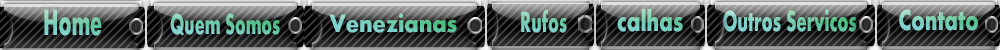
<style>
.page{position:relative;width:1000px;height:50px}
.page>*{position:absolute;margin:0}
.t1{font:37.7px "Aharoni-Bold";color:#7bceba;scale:0.56 1}
.t2{font:29.5px "Aharoni-Bold";scale:0.6 1}
.t3{font:26px "Aharoni-Bold";scale:0.89 1}
.t4{font:30.4px "Aharoni-Bold";color:#78ceb9;scale:0.59 1}
.t5{font:30px "Aharoni-Bold";color:#7aceb9;scale:0.74 1}
.t6{font:30px "Aharoni-Bold";scale:0.6 1}
.t7{font:30px "Aharoni-Bold";scale:0.72 1}
</style>
<div class="page">
<p class="t1" style="left:44px;top:9px;width:58px;height:27px">Home</p>
<p class="t2" style="left:170px;top:13px;width:110px;height:23px">Quem Somos</p>
<p class="t3" style="left:329px;top:13px;width:128px;height:20px">Venezianas</p>
<p class="t4" style="left:521px;top:9px;width:46px;height:24px">Rufos</p>
<p class="t5" style="left:617px;top:9px;width:66px;height:23px">calhas</p>
<p class="t6" style="left:723px;top:9px;width:134px;height:23px">Outros Servicos</p>
<p class="t7" style="left:899px;top:9px;width:79px;height:22px">Contato</p>
</div>
